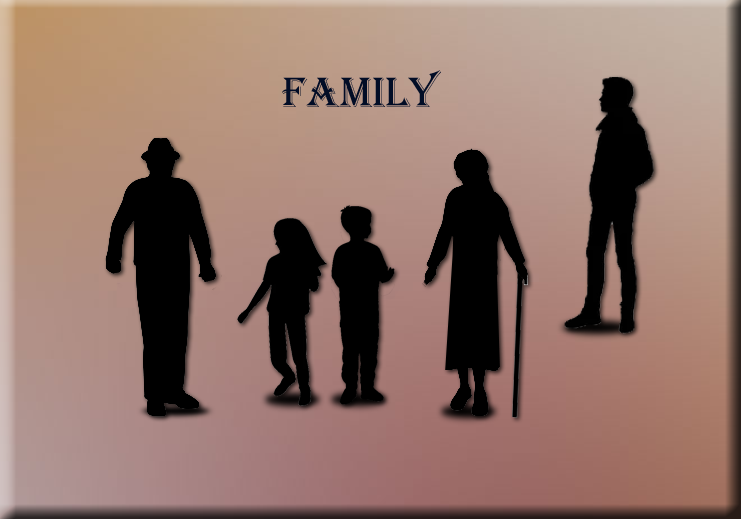
<style>
.page{position:relative;width:741px;height:519px}
.page>*{position:absolute;margin:0}
.t1{font:44px "Algerian";color:#020d26}
</style>
<div class="page">
<p class="t1" style="left:282px;top:70px;width:159px;height:37px">Family</p>
</div>
